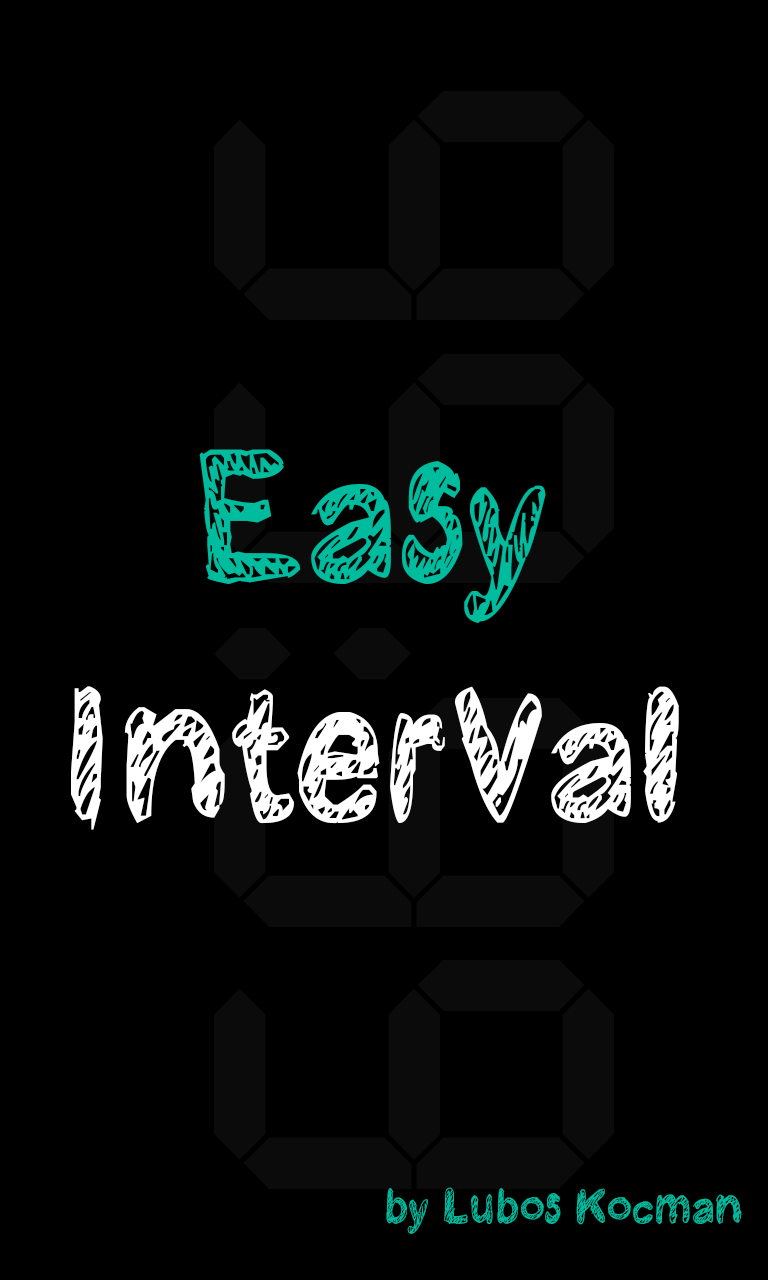
<style>
.page{position:relative;width:768px;height:1280px;background:#000000}
.page>*{position:absolute;margin:0}
.t1{font:199.7px "Kraboudja";color:#ffffff}
.t2{font:199.7px "Kraboudja";color:#00bc9f}
.t3{font:50.4px "Kraboudja";color:#00bc9f}
</style>
<div class="page">
<p class="t1" style="left:71px;top:449px;width:608px;height:381px;text-align:center"><span class="t2">Easy<br></span>Interval</p>
<p class="t3" style="left:386px;top:1187px;width:356px;height:47px">by Lubos Kocman</p>
</div>
